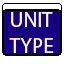
<style>
.page{position:relative;width:64px;height:64px;background:#180082}
.page>*{position:absolute;margin:0}
.t1{font:21px "MyriadPro-Regular";color:#ffffff}
</style>
<div class="page">
<p class="t1" style="left:9px;top:12px;width:45px;height:41px">UNIT<br>TYPE</p>
</div>
